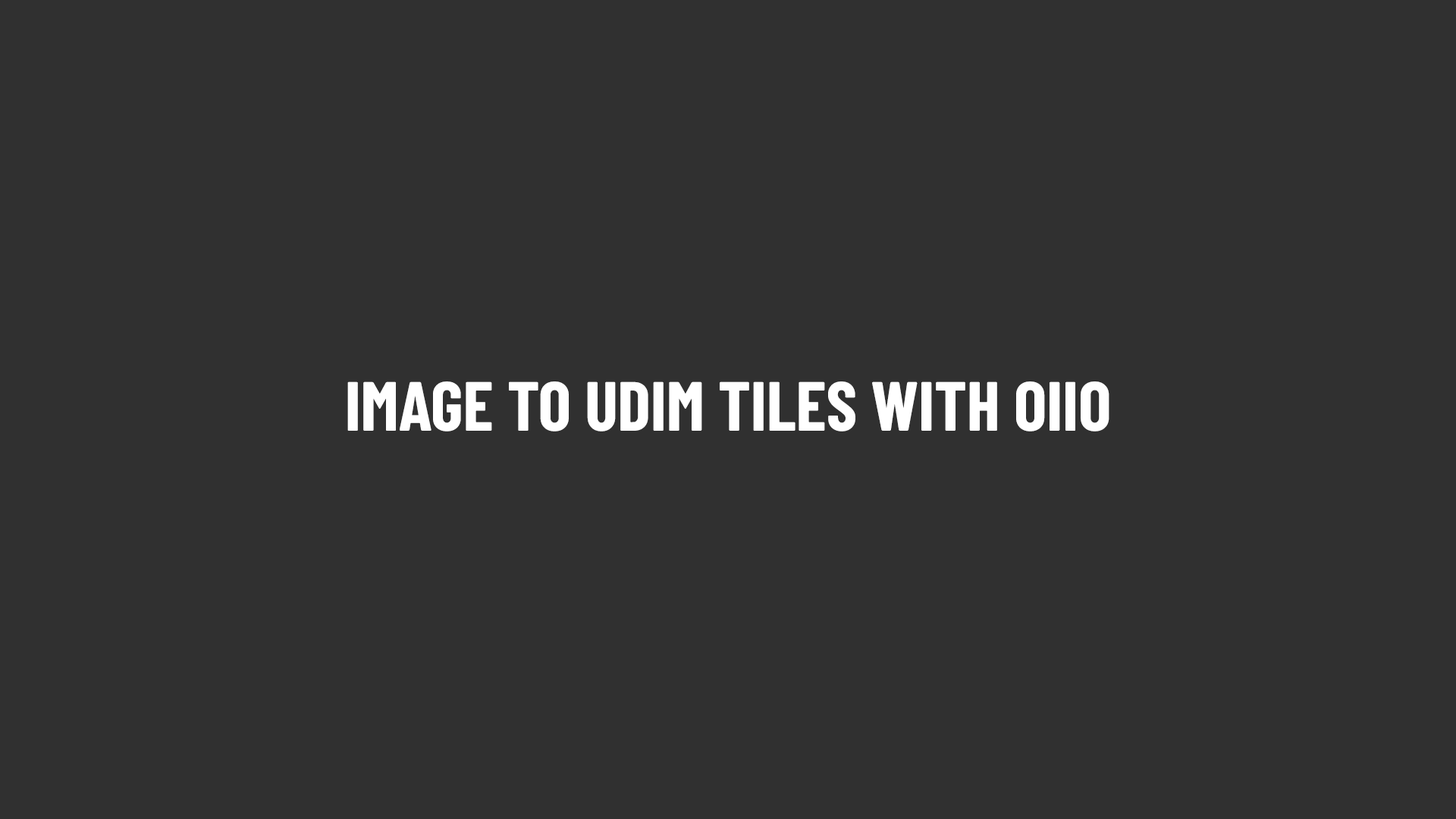
<style>
.page{position:relative;width:1456px;height:819px;background:#303030}
.page>*{position:absolute;margin:0}
.t1{font:69.3px "BarlowCondensed-Bold";color:#ffffff}
</style>
<div class="page">
<p class="t1" style="left:347px;top:381px;width:762px;height:50px">IMAGE TO UDIM TILES WITH OIIO</p>
</div>
